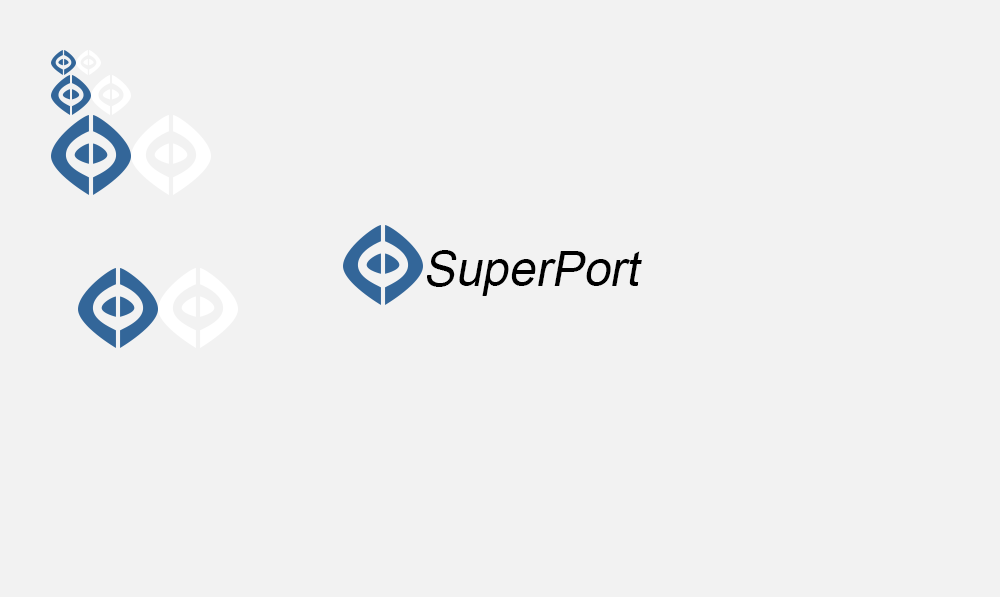
<style>
.page{position:relative;width:1000px;height:600px;background:#f2f2f2}
.page>*{position:absolute;margin:0}
.t1{font:48px "ArialMT";color:#000000;font-style:italic}
</style>
<div class="page">
<p class="t1" style="left:427px;top:250px;width:215px;height:46px">SuperPort</p>
</div>
